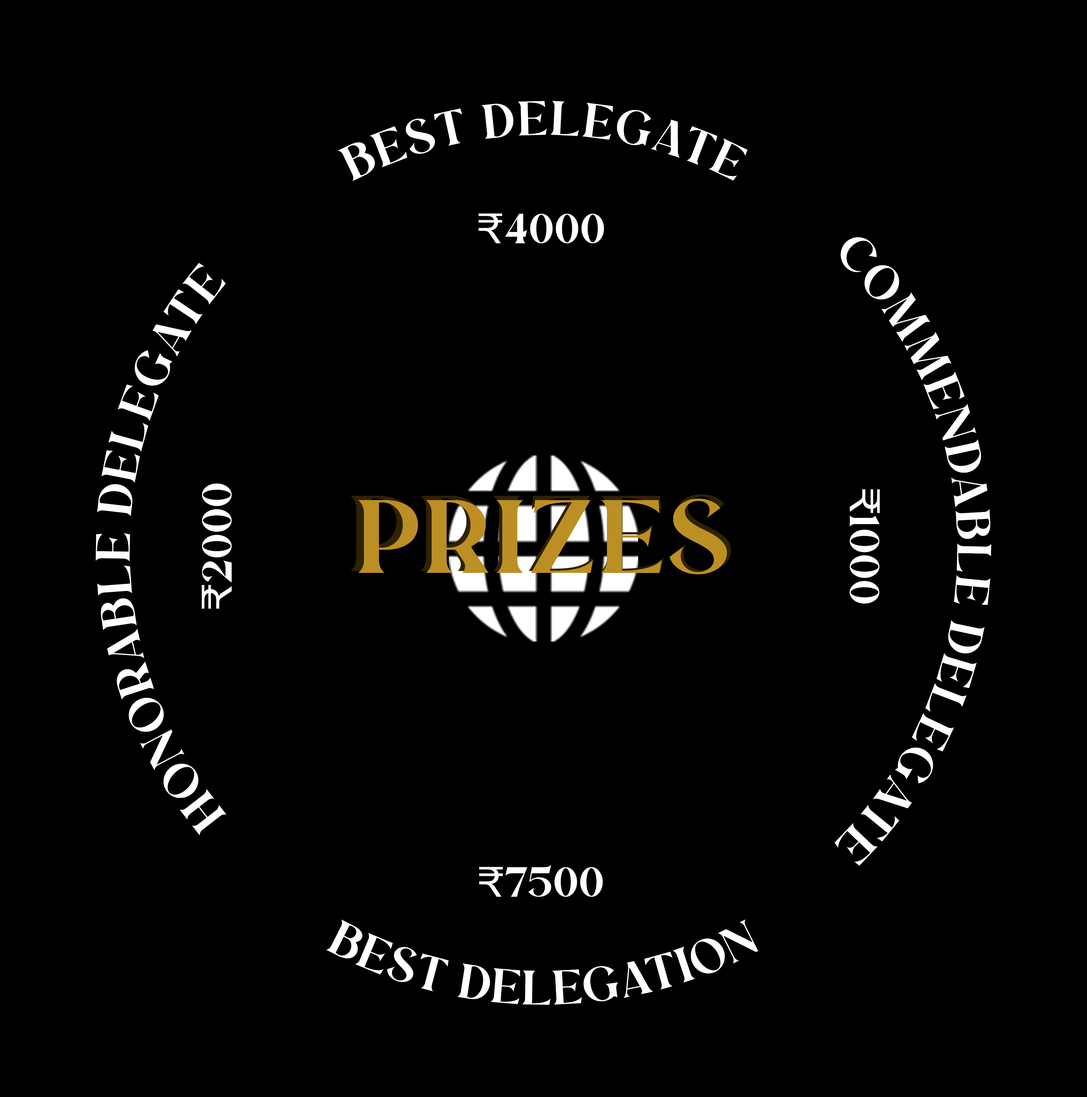
<style>
.page{position:relative;width:1087px;height:1097px;background:#000000}
.page>*{position:absolute;margin:0}
.t1{font:48.1px "Regis-SemiBold";letter-spacing:0.01em;color:#ffffff}
.t2{font:42.2px "Regis-SemiBold";letter-spacing:0.01em;color:#ffffff}
.t3{font:42.2px "Mulish-Medium";letter-spacing:0.01em;color:#ffffff}
.t4{font:104px "Regis-SemiBold";letter-spacing:0.01em;color:#bb8f23}
</style>
<div class="page">
<p class="t1" style="left:338px;top:101px;width:410px;height:80px">BEST DELEGATE</p>
<p class="t1" style="left:834px;top:237px;width:157px;height:629px;text-align:center">COMMENDABLE DELEGATE</p>
<p class="t1" style="left:96px;top:263px;width:130px;height:573px;text-align:center">HONORABLE DELEGATE</p>
<p class="t2" style="left:202px;top:483px;width:30px;height:126px;rotate:-90deg"><span class="t3">₹</span>2000</p>
<p class="t2" style="left:849px;top:489px;width:31px;height:115px;rotate:90deg"><span class="t3">₹</span>1000</p>
<p class="t4" style="left:358px;top:498px;width:369px;height:77px">PRIZES</p>
<p class="t2" style="left:479px;top:865px;width:124px;height:32px"><span class="t3">₹</span>7500</p>
<p class="t1" style="left:326px;top:920px;width:432px;height:85px;text-align:center">BEST DELEGATION</p>
</div>
